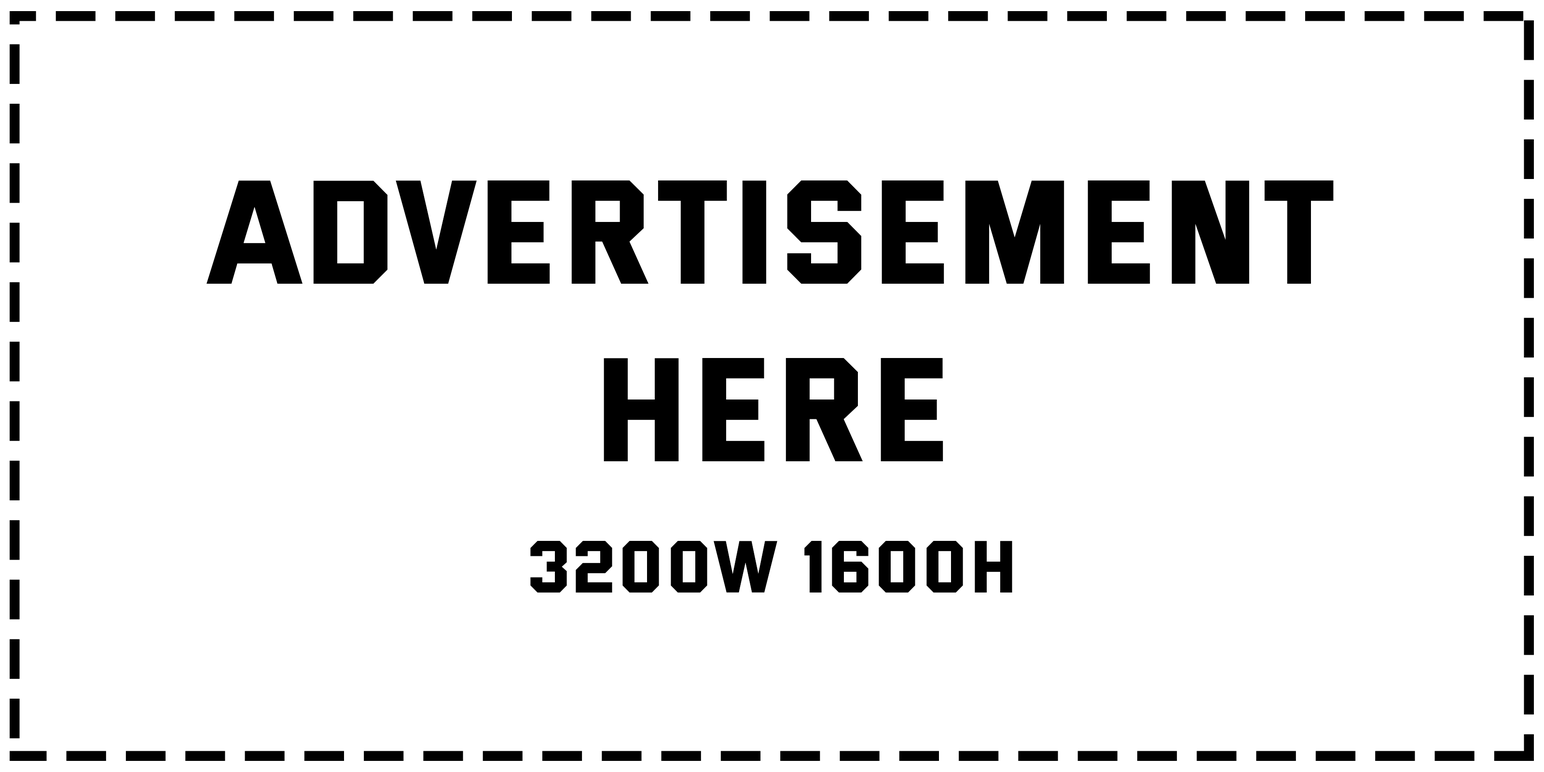
<style>
.page{position:relative;width:1544px;height:772px;background:#ffffff}
.page>*{position:absolute;margin:0}
.t1{font:147.8px "Versa-Versa";color:#000000}
.t2{font:73.9px "Versa-Versa";color:#000000}
</style>
<div class="page">
<p class="t1" style="left:207px;top:180px;width:1127px;height:413px;text-align:center">advertisement<br>here<br><br><span class="t2">3200W 1600H</span></p>
</div>
